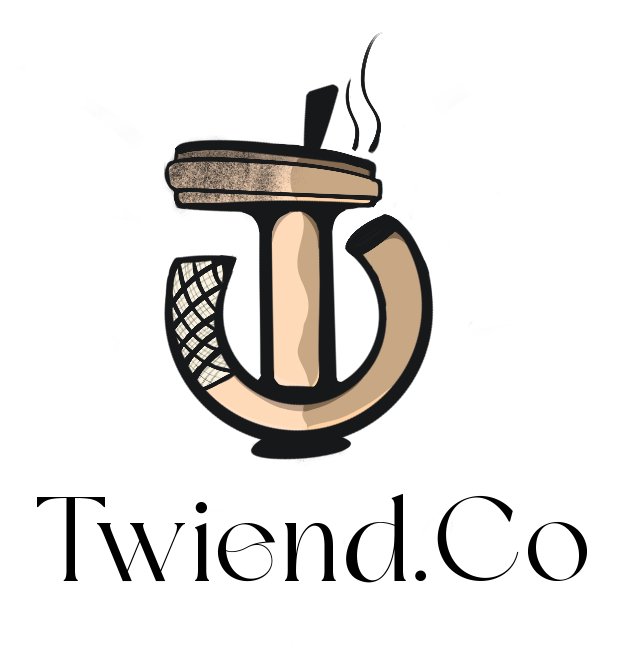
<style>
.page{position:relative;width:628px;height:648px;background:#ffffff}
.page>*{position:absolute;margin:0}
.t1{font:120px "DreamAvenue";letter-spacing:0.03em;color:#000000}
</style>
<div class="page">
<p class="t1" style="left:37px;top:493px;width:550px;height:90px">Twiend.Co</p>
</div>
